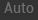
<style>
.page{position:relative;width:38px;height:20px;background:#333333}
.page>*{position:absolute;margin:0}
.t1{font:14px "Roboto-Regular";color:#717171}
</style>
<div class="page">
<p class="t1" style="left:4px;top:2px;width:30px;height:11px">Auto</p>
</div>
